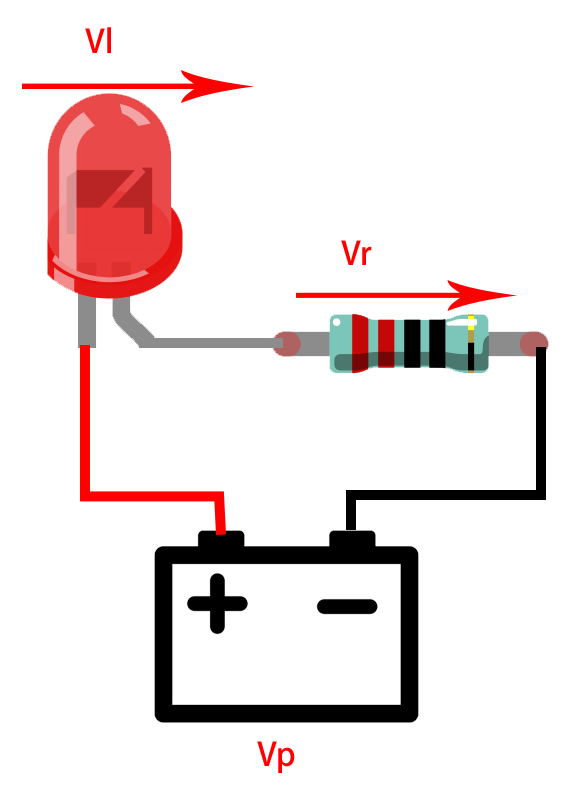
<style>
.page{position:relative;width:570px;height:797px;background:#ffffff}
.page>*{position:absolute;margin:0}
.t1{font:32px "AdobeHeitiStd-Regular";color:#ff0000}
</style>
<div class="page">
<p class="t1" style="left:85px;top:27px;width:26px;height:26px">Vl</p>
<p class="t1" style="left:341px;top:240px;width:31px;height:25px">Vr</p>
<p class="t1" style="left:257px;top:741px;width:38px;height:32px">Vp</p>
</div>
